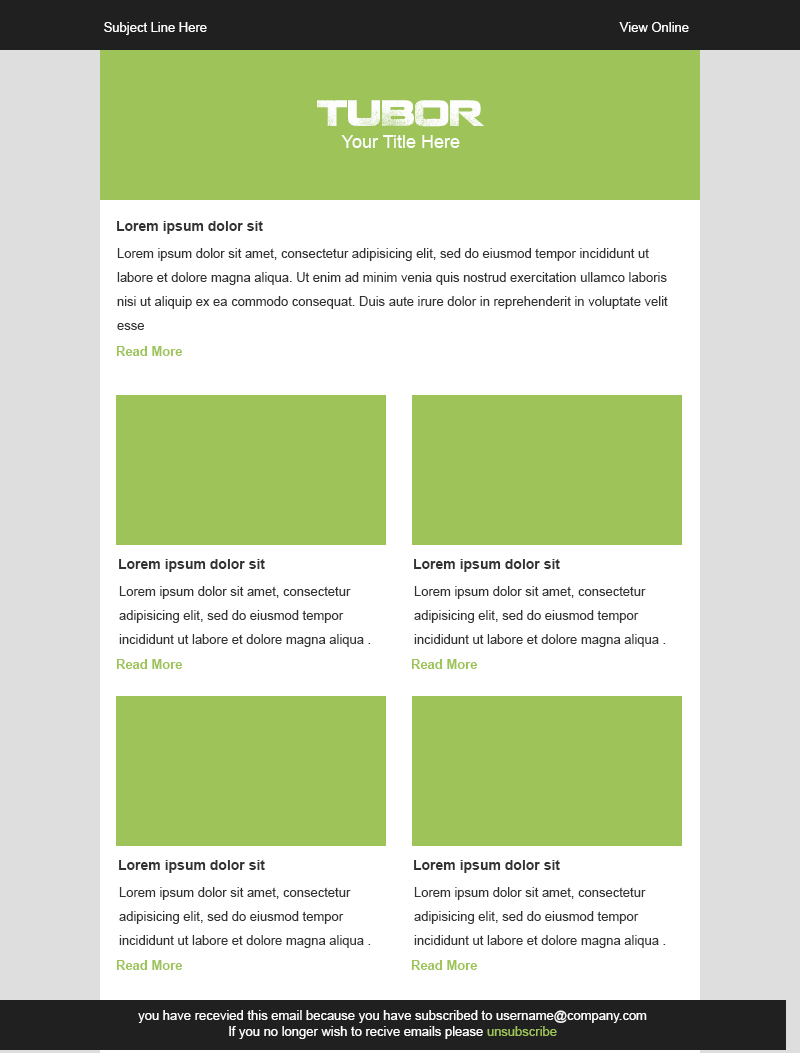
<style>
.page{position:relative;width:800px;height:1053px;background:#ffffff}
.page>*{position:absolute;margin:0}
.t1{font:13px "ArialMT";color:#fefefe}
.t2{font:36px "Coalition";color:#fefefe;text-transform:uppercase}
.t3{font:18px "ArialMT";color:#fefefe}
.t4{font:14px "Arial-BoldMT";color:#333333}
.t5{font:13px/24px "ArialMT";color:#333333}
.t6{font:13px "Arial-BoldMT";color:#9ec459}
.t7{font:13px "ArialMT";color:#9ec459}
</style>
<div class="page">
<p class="t1" style="left:104px;top:22px;width:103px;height:13px">Subject Line Here</p>
<p class="t1" style="left:619px;top:22px;width:70px;height:10px">View Online</p>
<p class="t2" style="left:317px;top:100px;width:167px;height:27px">Tubor</p>
<p class="t3" style="left:341px;top:135px;width:119px;height:13px">Your Title Here</p>
<p class="t4" style="left:117px;top:221px;width:146px;height:13px">Lorem ipsum dolor sit</p>
<p class="t5" style="left:117px;top:248px;width:551px;height:82px;text-align:right">Lorem ipsum dolor sit amet, consectetur adipisicing elit, sed do eiusmod tempor incididunt ut labore et dolore magna aliqua. Ut enim ad minim venia quis nostrud exercitation ullamco laboris nisi ut aliquip ex ea commodo consequat. Duis aute irure dolor in reprehenderit in voluptate velit esse</p>
<p class="t6" style="left:116px;top:346px;width:67px;height:10px">Read More</p>
<p class="t4" style="left:119px;top:559px;width:146px;height:13px">Lorem ipsum dolor sit</p>
<p class="t4" style="left:414px;top:559px;width:146px;height:13px">Lorem ipsum dolor sit</p>
<p class="t5" style="left:119px;top:586px;width:252px;height:61px">Lorem ipsum dolor sit amet, consectetur adipisicing elit, sed do eiusmod tempor incididunt ut labore et dolore magna aliqua .</p>
<p class="t5" style="left:414px;top:586px;width:252px;height:61px">Lorem ipsum dolor sit amet, consectetur adipisicing elit, sed do eiusmod tempor incididunt ut labore et dolore magna aliqua .</p>
<p class="t6" style="left:116px;top:659px;width:67px;height:10px">Read More</p>
<p class="t6" style="left:411px;top:659px;width:67px;height:10px">Read More</p>
<p class="t4" style="left:119px;top:860px;width:146px;height:13px">Lorem ipsum dolor sit</p>
<p class="t4" style="left:414px;top:860px;width:146px;height:13px">Lorem ipsum dolor sit</p>
<p class="t5" style="left:119px;top:887px;width:252px;height:61px">Lorem ipsum dolor sit amet, consectetur adipisicing elit, sed do eiusmod tempor incididunt ut labore et dolore magna aliqua .</p>
<p class="t5" style="left:414px;top:887px;width:252px;height:61px">Lorem ipsum dolor sit amet, consectetur adipisicing elit, sed do eiusmod tempor incididunt ut labore et dolore magna aliqua .</p>
<p class="t6" style="left:116px;top:960px;width:67px;height:10px">Read More</p>
<p class="t6" style="left:411px;top:960px;width:67px;height:10px">Read More</p>
<p class="t1" style="left:138px;top:1010px;width:509px;height:29px;text-align:center">you have recevied this email because you have subscribed to username@company.com<br>If you no longer wish to recive emails please <span class="t7">unsubscribe</span></p>
</div>
